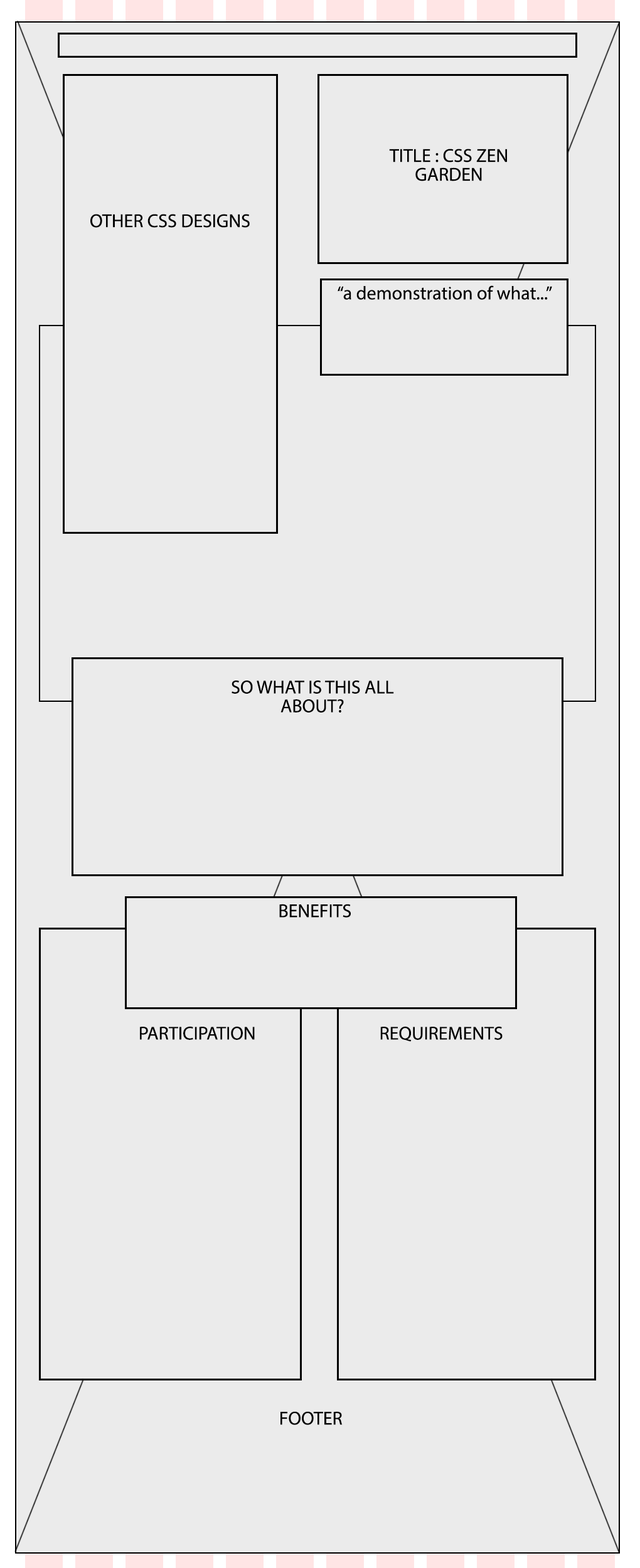
<style>
.page{position:relative;width:640px;height:1568px;background:#ebebeb}
.page>*{position:absolute;margin:0}
.t1{font:18.8px/18.8px "MyriadPro-Regular";color:#000000}
.t2{font:18.9px "MyriadPro-Regular";color:#000000}
.t3{font:18.8px "MyriadPro-Regular";color:#000000}
</style>
<div class="page">
<p class="t1" style="left:389px;top:149px;width:118px;height:32px;text-align:center">TITLE : CSS ZEN GARDEN</p>
<p class="t2" style="left:90px;top:214px;width:160px;height:14px">OTHER CSS DESIGNS</p>
<p class="t3" style="left:337px;top:285px;width:215px;height:15px">“a demonstration of what...”</p>
<p class="t3" style="left:231px;top:681px;width:163px;height:31px">SO WHAT IS THIS ALL ABOUT?</p>
<p class="t3" style="left:279px;top:904px;width:72px;height:14px">BENEFITS</p>
<p class="t3" style="left:140px;top:1026px;width:115px;height:14px">PARTICIPATION</p>
<p class="t3" style="left:380px;top:1026px;width:122px;height:16px">REQUIREMENTS</p>
<p class="t3" style="left:280px;top:1411px;width:62px;height:14px">FOOTER</p>
</div>
